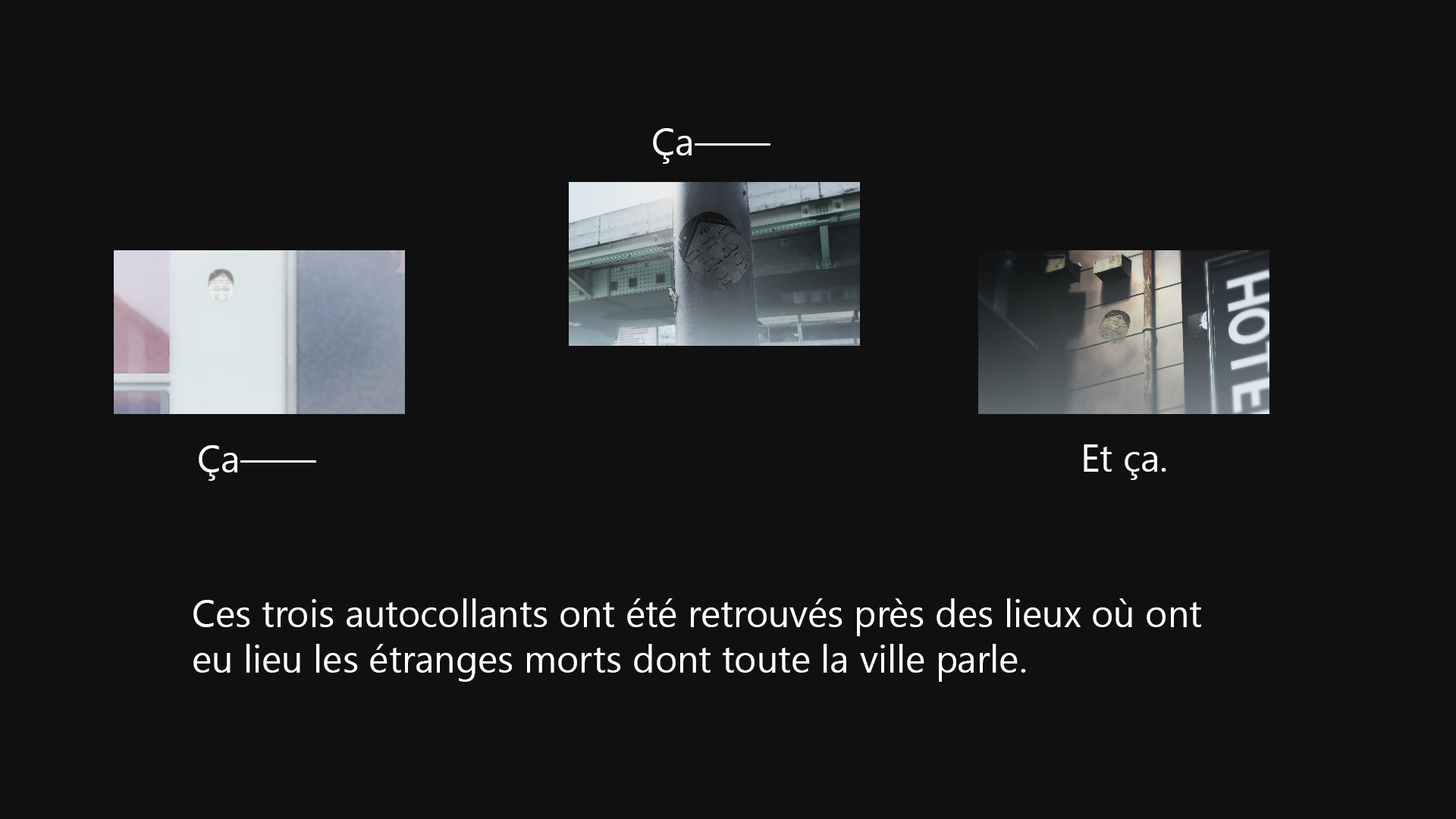
<style>
.page{position:relative;width:1456px;height:819px;background:#101010}
.page>*{position:absolute;margin:0}
.t1{font:37.9px "SegoeUIHistoric";color:#ffffff}
</style>
<div class="page">
<p class="t1" style="left:653px;top:128px;width:117px;height:36px">Ça——</p>
<p class="t1" style="left:199px;top:445px;width:117px;height:36px">Ça——</p>
<p class="t1" style="left:1084px;top:444px;width:82px;height:36px">Et ça.</p>
<p class="t1" style="left:193px;top:598px;width:1008px;height:84px">Ces trois autocollants ont été retrouvés près des lieux où ont <br>eu lieu les étranges morts dont toute la ville parle.</p>
</div>
